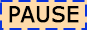
<style>
.page{position:relative;width:87px;height:30px;background:#ffdbaa}
.page>*{position:absolute;margin:0}
.t1{font:21px "Verdana";color:#000000;font-weight:bold}
</style>
<div class="page">
<p class="t1" style="left:9px;top:6px;width:70px;height:17px">PAUSE</p>
</div>
